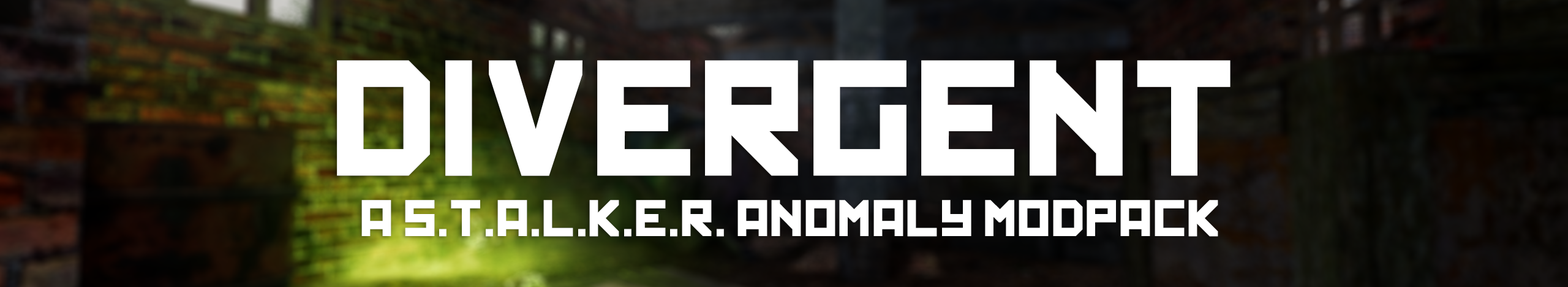
<style>
.page{position:relative;width:1568px;height:287px}
.page>*{position:absolute;margin:0}
.t1{font:156px "Kremlin";color:#ffffff;text-transform:uppercase}
.t2{font:49px "Kremlin";color:#ffffff;text-transform:uppercase}
</style>
<div class="page">
<p class="t1" style="left:337px;top:60px;width:894px;height:116px">Divergent</p>
<p class="t2" style="left:361px;top:200px;width:857px;height:36px">A s.t.a.l.k.e.r. Anomaly modpack</p>
</div>
